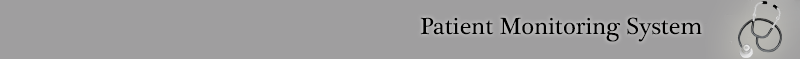
<style>
.page{position:relative;width:800px;height:59px;background:#9f9e9f}
.page>*{position:absolute;margin:0}
.t1{font:24px "PlantagenetCherokee";color:#000000}
</style>
<div class="page">
<p class="t1" style="left:420px;top:17px;width:282px;height:25px">Patient Monitoring System</p>
</div>
